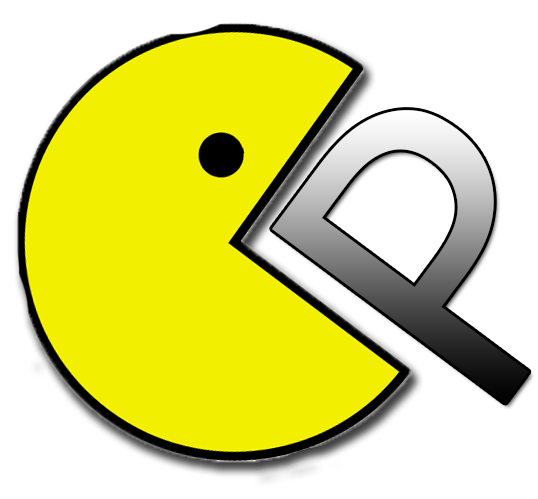
<style>
.page{position:relative;width:538px;height:499px;background:#ffffff}
.page>*{position:absolute;margin:0}
.t1{font:400px "Verdana"}
</style>
<div class="page">
<p class="t1" style="left:272px;top:110px;width:257px;height:293px;rotate:-53deg">P</p>
</div>
